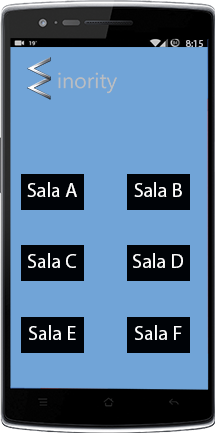
<style>
.page{position:relative;width:215px;height:433px;background:#71a4d7}
.page>*{position:absolute;margin:0}
.t1{font:10px "MyriadPro-Regular";color:#c4c5cb}
.t2{font:20px "MyriadPro-Regular";color:#ffffff}
</style>
<div class="page">
<p class="t1" style="left:186px;top:40px;width:17px;height:7px">8:15</p>
<p class="t2" style="left:27px;top:182px;width:50px;height:15px">Sala A</p>
<p class="t2" style="left:134px;top:182px;width:48px;height:15px">Sala B</p>
<p class="t2" style="left:28px;top:253px;width:49px;height:15px">Sala C</p>
<p class="t2" style="left:133px;top:253px;width:50px;height:15px">Sala D</p>
<p class="t2" style="left:29px;top:325px;width:47px;height:15px">Sala E</p>
<p class="t2" style="left:135px;top:325px;width:47px;height:15px">Sala F</p>
</div>
